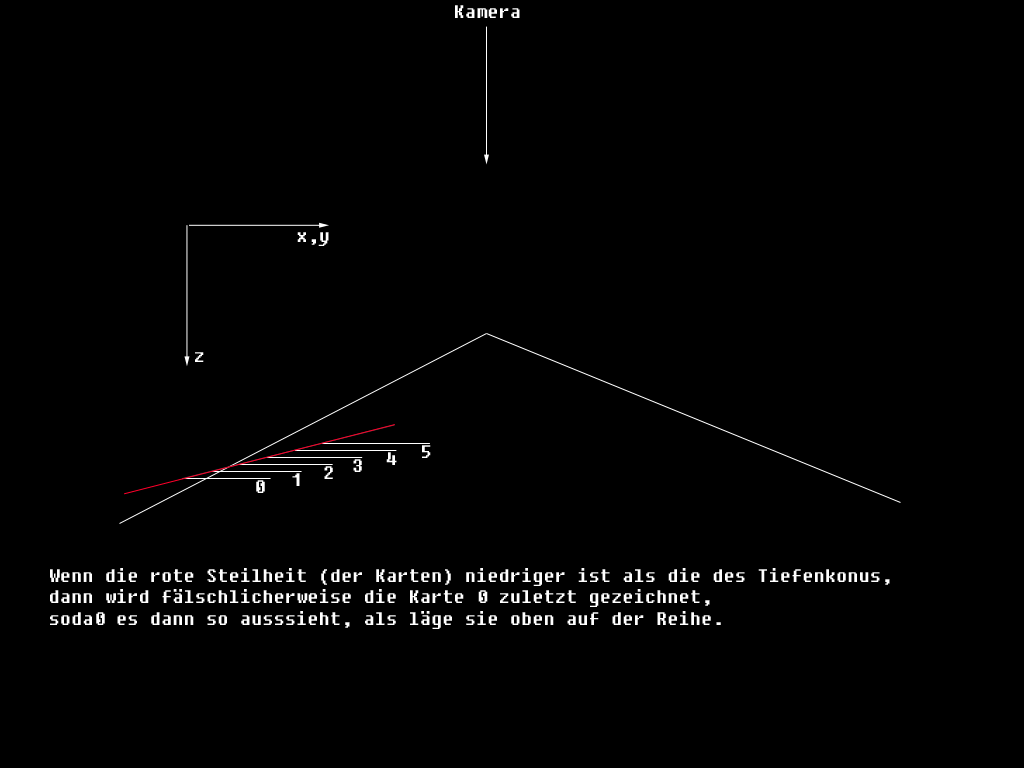
<style>
.page{position:relative;width:1024px;height:768px;background:#000000}
.page>*{position:absolute;margin:0}
.t1{font:18px "Fixedsys";color:#ffffff}
</style>
<div class="page">
<p class="t1" style="left:455px;top:5px;width:65px;height:13px">Kamera</p>
<p class="t1" style="left:297px;top:232px;width:32px;height:14px">x,y</p>
<p class="t1" style="left:195px;top:352px;width:9px;height:10px">z</p>
<p class="t1" style="left:422px;top:445px;width:9px;height:13px">5</p>
<p class="t1" style="left:353px;top:459px;width:9px;height:13px">3</p>
<p class="t1" style="left:386px;top:452px;width:11px;height:13px">4</p>
<p class="t1" style="left:292px;top:473px;width:8px;height:13px">1</p>
<p class="t1" style="left:324px;top:466px;width:9px;height:13px">2</p>
<p class="t1" style="left:256px;top:480px;width:9px;height:13px">0</p>
<p class="t1" style="left:50px;top:568px;width:840px;height:61px">Wenn die rote Steilheit (der Karten) niedriger ist als die des Tiefenkonus,<br>dann wird fälschlicherweise die Karte 0 zuletzt gezeichnet,<br>soda0 es dann so ausssieht, als läge sie oben auf der Reihe.</p>
</div>
